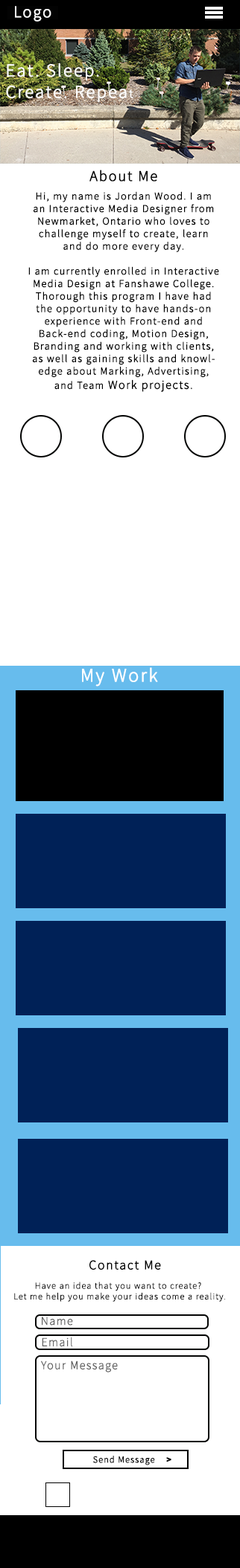
<style>
.page{position:relative;width:240px;height:1568px;background:#ffffff}
.page>*{position:absolute;margin:0}
.t1{font:16.4px "SourceSansPro-Light";letter-spacing:0.075em;color:#ffffff;font-weight:bold}
.t2{font:17.9px "SourceSansPro-Light";letter-spacing:0.075em;color:#ffffff;font-weight:bold}
.t3{font:12.6px "SourceSansPro-Light";letter-spacing:0.075em;color:#ffffff;font-weight:bold}
.t4{font:14.9px "SourceSansPro-Light";letter-spacing:0.075em;color:#000000;font-weight:bold}
.t5{font:10.4px "SourceSansPro-Light";letter-spacing:0.075em;color:#000000;font-weight:bold}
.t6{font:11.9px "SourceSansPro-Light";letter-spacing:0.075em;color:#000000;font-weight:bold}
.t7{font:19.1px "SourceSansPro-Light";letter-spacing:0.075em;color:#ffffff;font-weight:bold}
.t8{font:13.1px "SourceSansPro-Light";letter-spacing:0.075em;color:#000000;font-weight:bold}
.t9{font:8.9px "SourceSansPro-ExtraLight";letter-spacing:0.075em;color:#030303;font-weight:bold}
.t10{font:6.1px "SourceSansPro-ExtraLight";letter-spacing:0.075em;color:#030303;font-weight:bold}
.t11{font:11.7px "SourceSansPro-ExtraLight";letter-spacing:0.075em;color:#5f5f5f;font-weight:bold}
.t12{font:12px "SourceSansPro-ExtraLight";letter-spacing:0.075em;color:#5f5f5f;font-weight:bold}
.t13{font:9.2px "SourceSansPro-Light";letter-spacing:0.075em;color:#000000;font-weight:bold}
.t14{font:9.2px "SourceSansPro-Bold";letter-spacing:0.075em;color:#000000;font-weight:bold}
</style>
<div class="page">
<p class="t1" style="left:15px;top:6px;width:36px;height:16px">Logo</p>
<p class="t2" style="left:6px;top:63px;width:127px;height:39px">Eat. Sleep. <br>Create. Repea<span class="t3">t</span></p>
<p class="t4" style="left:89px;top:170px;width:68px;height:11px">About Me</p>
<p class="t5" style="left:28px;top:191px;width:191px;height:201px;text-align:center">Hi, my name is Jordan Wood. I am an Interactive Media Designer from Newmarket, Ontario who loves to challenge myself to create, learn and do more every day. <br><br>I am currently enrolled in Interactive Media Design at Fanshawe College. Thorough this program I have had the opportunity to have hands-on experience with Front-end and Back-end coding, Motion Design, Branding and working with clients, as well as gaining skills and knowledge about Marking, Advertising, and Team<span class="t6"> Work projects.</span></p>
<p class="t7" style="left:82px;top:667px;width:76px;height:20px">My Work</p>
<p class="t8" style="left:89px;top:1260px;width:72px;height:10px">Contact Me</p>
<p class="t9" style="left:14px;top:1282px;width:211px;height:20px;text-align:center">Have an idea that you want to create? <br>Let me help you make your ideas come a reality<span class="t10">.</span></p>
<p class="t11" style="left:42px;top:1317px;width:31px;height:9px">Name</p>
<p class="t12" style="left:42px;top:1337px;width:30px;height:10px">Email</p>
<p class="t12" style="left:41px;top:1360px;width:77px;height:12px">Your Message</p>
<p class="t13" style="left:93px;top:1456px;width:78px;height:9px">Send Message   <span class="t14"> &gt;</span></p>
</div>
